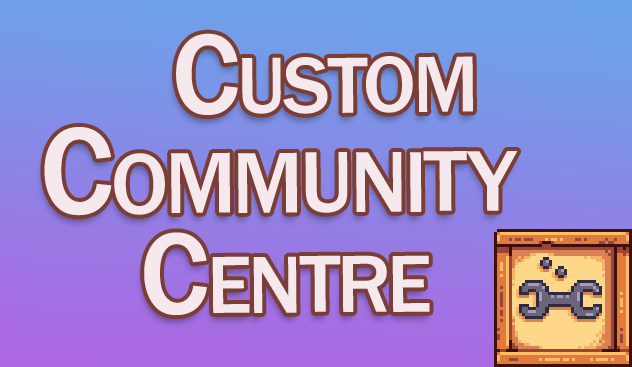
<style>
.page{position:relative;width:632px;height:367px}
.page>*{position:absolute;margin:0}
.t1{font:118px "FranklinGothic-Medium";letter-spacing:-0.025em;color:#f5e9ee;font-variant:small-caps}
.t2{font:128px "FranklinGothic-Medium";letter-spacing:-0.025em;color:#f5e9ee;font-variant:small-caps}
.t3{font:120px "FranklinGothic-Medium";letter-spacing:-0.025em;color:#f5e9ee;font-variant:small-caps}
</style>
<div class="page">
<p class="t1" style="left:176px;top:33px;width:297px;height:82px">Custom</p>
<p class="t2" style="left:44px;top:127px;width:474px;height:89px">Community</p>
<p class="t3" style="left:144px;top:232px;width:286px;height:83px">Centre</p>
</div>
